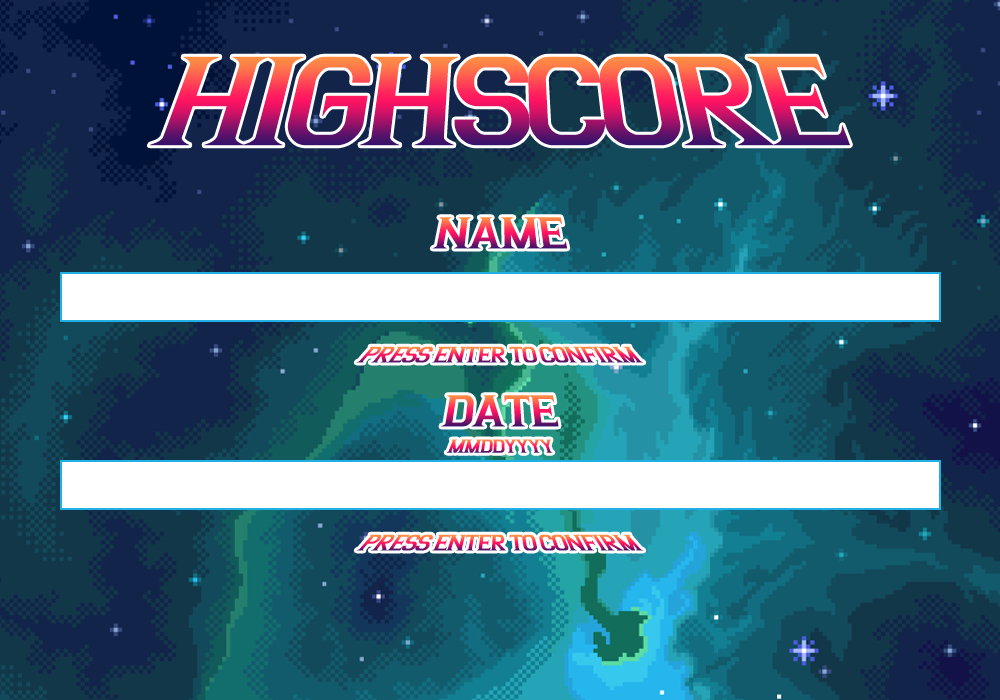
<style>
.page{position:relative;width:1000px;height:700px}
.page>*{position:absolute;margin:0}
.t1{font:124.2px "Argentina";letter-spacing:-0.04em}
.t2{font:43.4px "Argentina";letter-spacing:-0.04em}
.t3{font:21.9px "Argentina";letter-spacing:-0.04em}
.t4{font:18.1px "Argentina";letter-spacing:-0.04em}
</style>
<div class="page">
<p class="t1" style="left:149px;top:56px;width:701px;height:90px">HIGHSCORE</p>
<p class="t2" style="left:432px;top:217px;width:136px;height:32px">NAME</p>
<p class="t3" style="left:356px;top:346px;width:288px;height:17px">PRESS ENTER TO CONFIRM</p>
<p class="t2" style="left:441px;top:395px;width:118px;height:32px">DATE</p>
<p class="t4" style="left:446px;top:439px;width:107px;height:14px">MMDDYYYY</p>
<p class="t3" style="left:356px;top:534px;width:288px;height:17px">PRESS ENTER TO CONFIRM</p>
</div>
